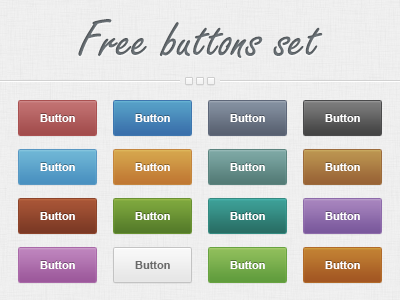
<style>
.page{position:relative;width:400px;height:300px}
.page>*{position:absolute;margin:0}
.t1{font:56px "FreestyleScript-Regular";color:#6c7378}
.t2{font:11px "Arial-BoldMT";color:#ffffff}
.t3{font:11px "Arial-BoldMT";color:#6a6a6a}
</style>
<div class="page">
<p class="t1" style="left:78px;top:19px;width:245px;height:39px">Free buttons set</p>
<p class="t2" style="left:40px;top:114px;width:35px;height:8px">Button</p>
<p class="t2" style="left:135px;top:114px;width:35px;height:8px">Button</p>
<p class="t2" style="left:230px;top:114px;width:35px;height:8px">Button</p>
<p class="t2" style="left:325px;top:114px;width:35px;height:8px">Button</p>
<p class="t2" style="left:40px;top:163px;width:35px;height:8px">Button</p>
<p class="t2" style="left:135px;top:163px;width:35px;height:8px">Button</p>
<p class="t2" style="left:230px;top:163px;width:35px;height:8px">Button</p>
<p class="t2" style="left:325px;top:163px;width:35px;height:8px">Button</p>
<p class="t2" style="left:40px;top:212px;width:35px;height:8px">Button</p>
<p class="t2" style="left:135px;top:212px;width:35px;height:8px">Button</p>
<p class="t2" style="left:230px;top:212px;width:35px;height:8px">Button</p>
<p class="t2" style="left:325px;top:212px;width:35px;height:8px">Button</p>
<p class="t2" style="left:40px;top:261px;width:35px;height:8px">Button</p>
<p class="t3" style="left:135px;top:261px;width:35px;height:8px">Button</p>
<p class="t2" style="left:230px;top:261px;width:35px;height:8px">Button</p>
<p class="t2" style="left:325px;top:261px;width:35px;height:8px">Button</p>
</div>
